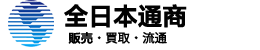
<style>
.page{position:relative;width:260px;height:50px;background:#ffffff}
.page>*{position:absolute;margin:0}
.t1{font:24px "FZLTZHK--GBK1-0";color:#020202;font-weight:bold}
.t2{font:12px "KozGoPr6N-Regular";color:#020202;font-weight:bold}
.t3{font:12px "FZLTZHK--GBK1-0";color:#020202;font-weight:bold}
</style>
<div class="page">
<p class="t1" style="left:64px;top:4px;width:123px;height:24px">全日本通商</p>
<p class="t2" style="left:68px;top:32px;width:99px;height:12px"><span class="t3">販売</span>・買取・流通</p>
</div>
